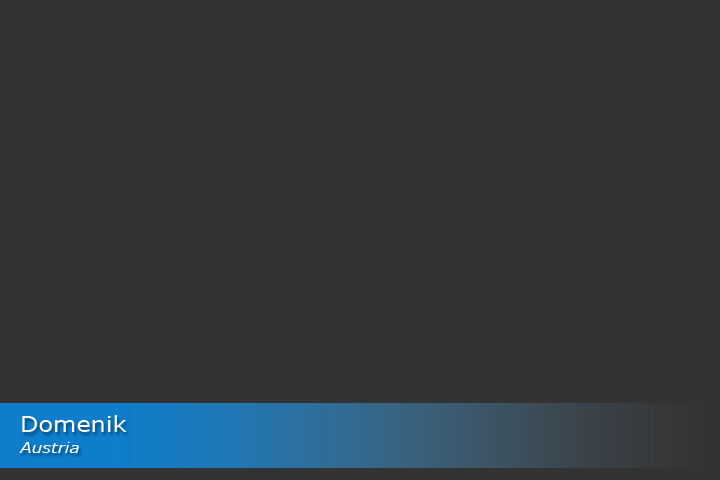
<style>
.page{position:relative;width:720px;height:480px;background:#333333}
.page>*{position:absolute;margin:0}
.t1{font:21.3px/21.3px "Verdana";color:#ffffff;scale:1.12 1}
.t2{font:15px/21px "Verdana-Italic";color:#ffffff;scale:1.12 1}
</style>
<div class="page">
<p class="t1" style="left:19px;top:415px;width:108px;height:38px">Domenik <br><span class="t2">Austria</span></p>
</div>
